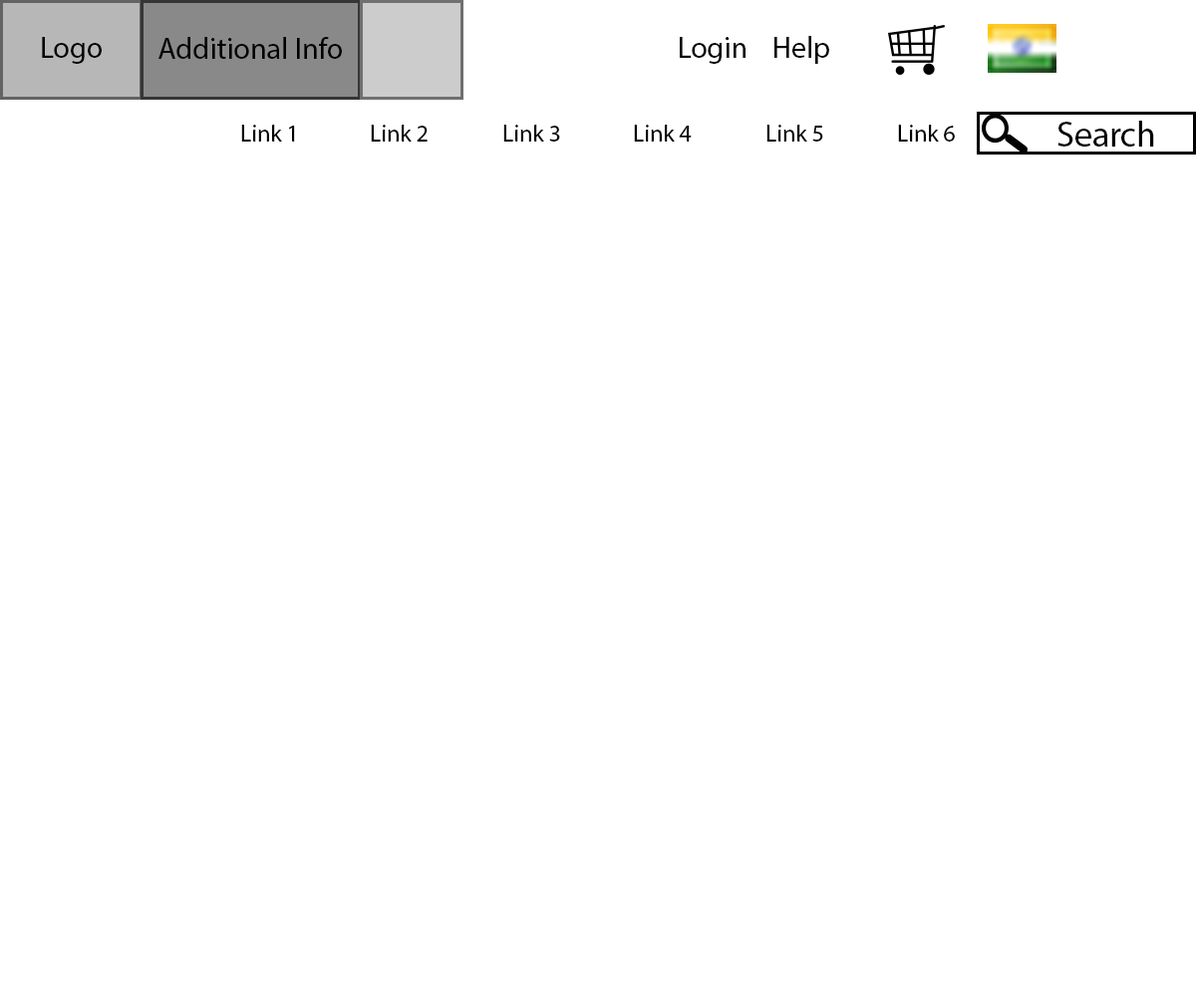
<style>
.page{position:relative;width:1196px;height:997px;background:#ffffff}
.page>*{position:absolute;margin:0}
.t1{font:29.9px "MyriadPro-Regular";color:#000000}
.t2{font:23.9px "MyriadPro-Regular";color:#000000}
.t3{font:35.9px "MyriadPro-Regular";color:#000000}
</style>
<div class="page">
<p class="t1" style="left:42px;top:37px;width:60px;height:27px">Logo</p>
<p class="t1" style="left:158px;top:37px;width:184px;height:22px">Additional Info</p>
<p class="t1" style="left:680px;top:37px;width:66px;height:27px">Login</p>
<p class="t1" style="left:775px;top:36px;width:54px;height:28px">Help</p>
<p class="t2" style="left:241px;top:125px;width:54px;height:17px">Link 1</p>
<p class="t2" style="left:371px;top:125px;width:57px;height:17px">Link 2</p>
<p class="t2" style="left:503px;top:125px;width:57px;height:17px">Link 3</p>
<p class="t2" style="left:634px;top:125px;width:58px;height:17px">Link 4</p>
<p class="t2" style="left:767px;top:125px;width:56px;height:17px">Link 5</p>
<p class="t2" style="left:898px;top:125px;width:57px;height:17px">Link 6</p>
<p class="t3" style="left:1058px;top:121px;width:96px;height:26px">Search</p>
</div>
